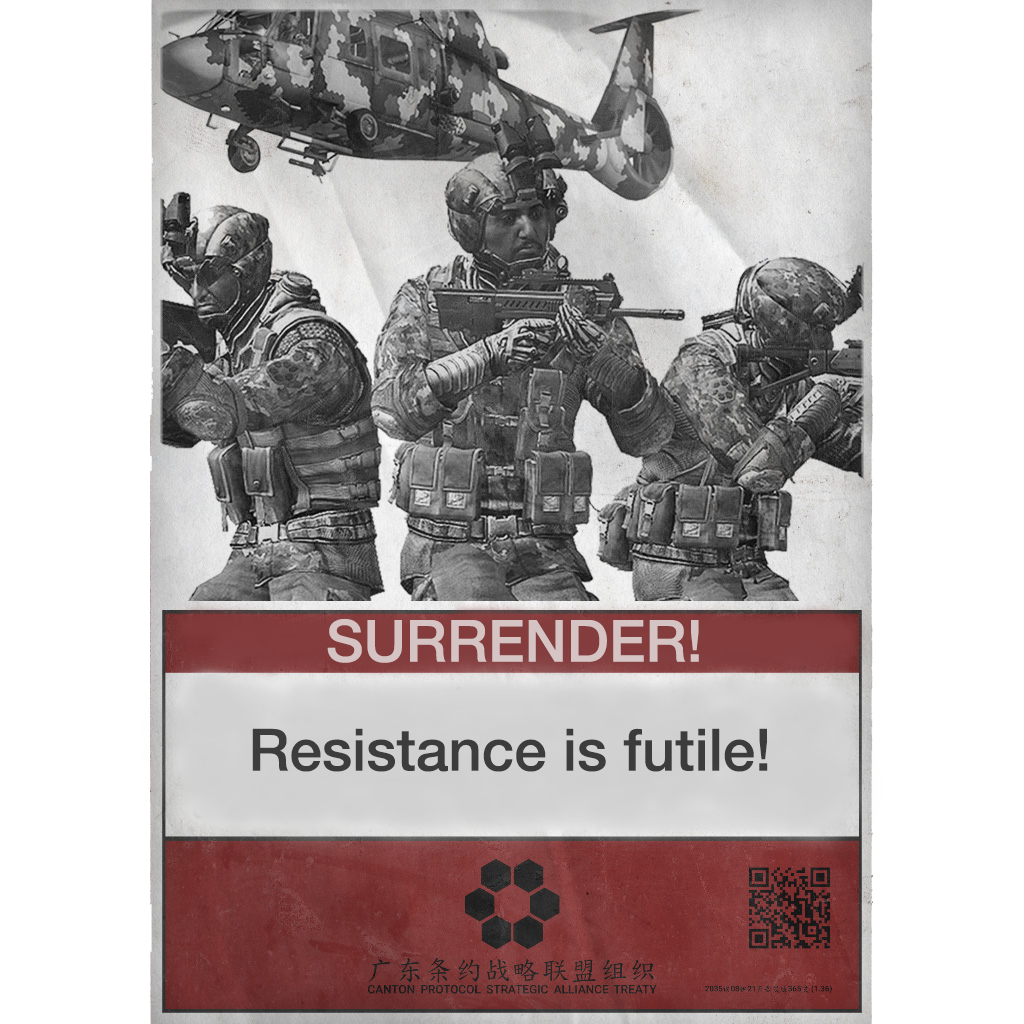
<style>
.page{position:relative;width:1024px;height:1024px;background:#ffffff}
.page>*{position:absolute;margin:0}
.t1{font:58.3px "HelveticaNeueLT-Medium";color:#d6c4c4}
.t2{font:58.3px "HelveticaNeueLT-Medium";color:#3c3c3c}
</style>
<div class="page">
<p class="t1" style="left:327px;top:619px;width:372px;height:44px">SURRENDER!</p>
<p class="t2" style="left:252px;top:728px;width:516px;height:44px">Resistance is futile!</p>
</div>
